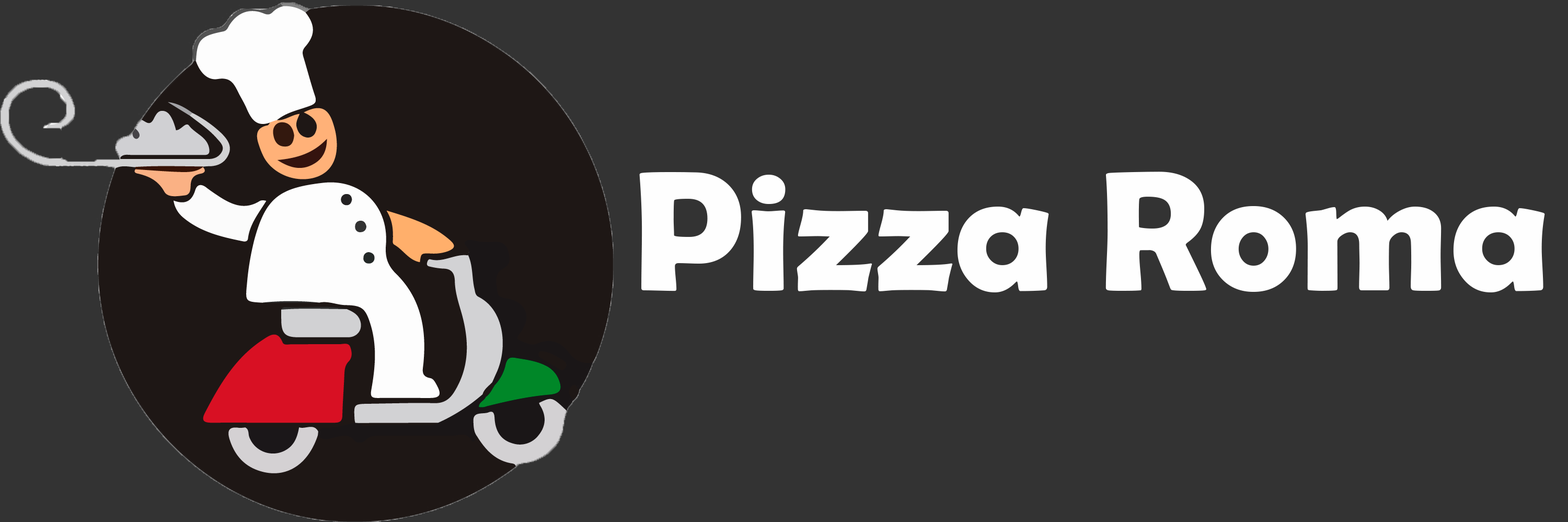
<style>
.page{position:relative;width:1568px;height:522px;background:#333333}
.page>*{position:absolute;margin:0}
.t1{font:172.5px "BerlinSansFBDemi-Bold";color:#fefefe}
</style>
<div class="page">
<p class="t1" style="left:639px;top:171px;width:906px;height:121px">Pizza Roma</p>
</div>
